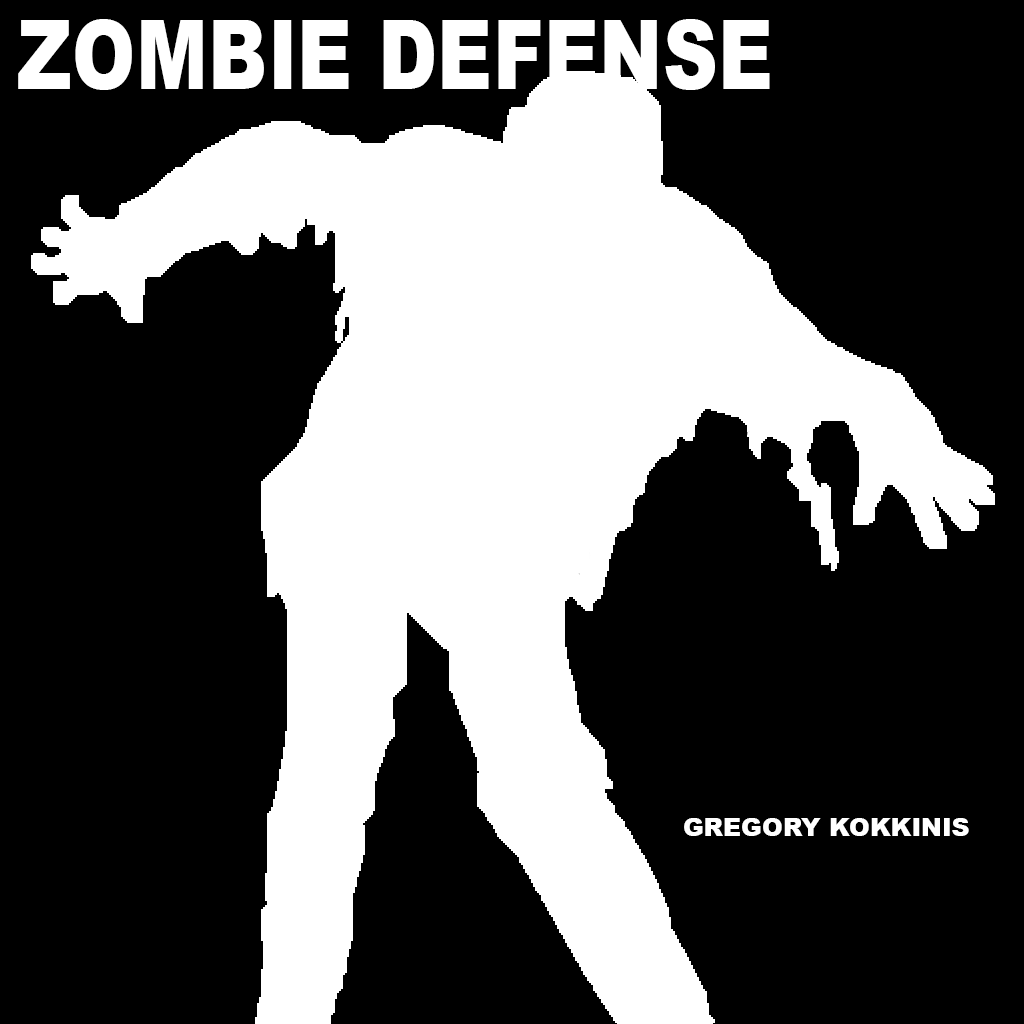
<style>
.page{position:relative;width:1024px;height:1024px;background:#000000}
.page>*{position:absolute;margin:0}
.t1{font:97.2px "Arial-Black";color:#ffffff;scale:0.79 1}
.t2{font:25px "Arial-Black";color:#ffffff}
</style>
<div class="page">
<p class="t1" style="left:18px;top:19px;width:752px;height:71px">ZOMBIE DEFENSE</p>
<p class="t2" style="left:684px;top:818px;width:285px;height:18px">GREGORY KOKKINIS</p>
</div>
